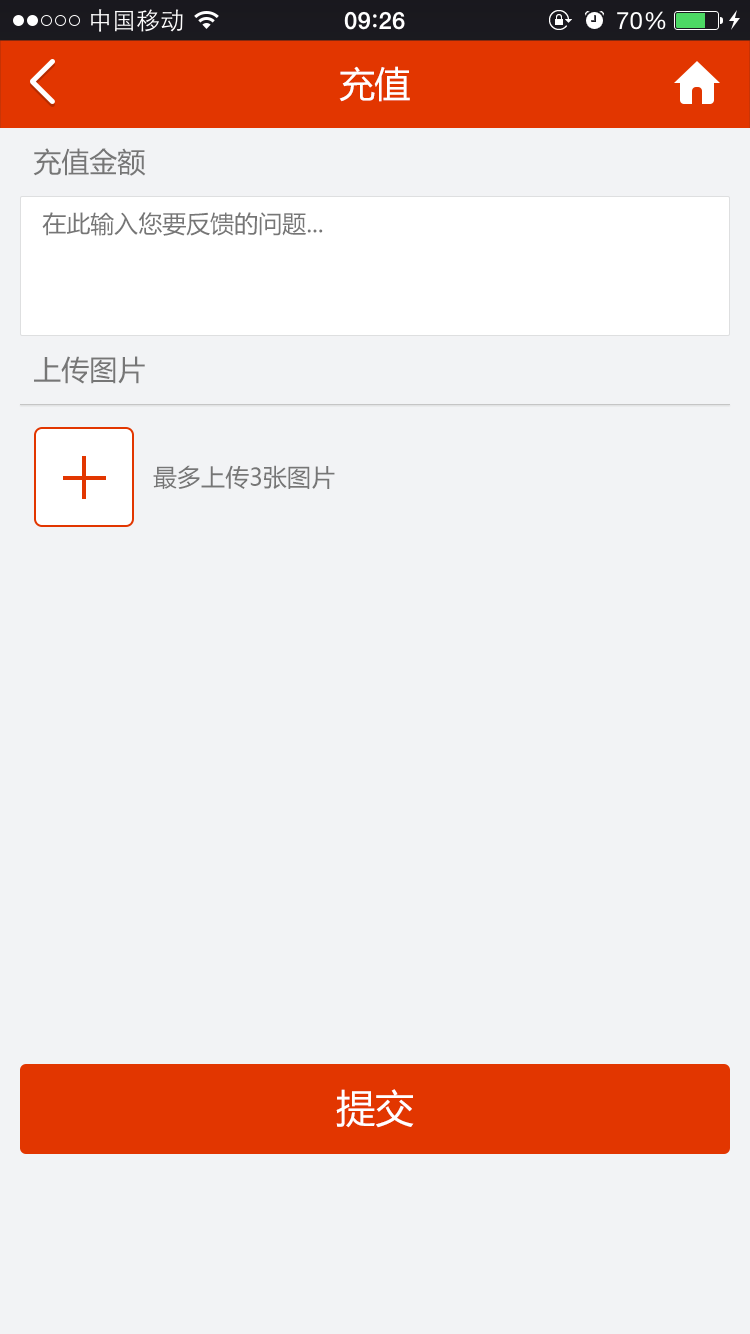
<style>
.page{position:relative;width:750px;height:1334px;background:#f2f3f5}
.page>*{position:absolute;margin:0}
.t1{font:36px "MicrosoftYaHei";letter-spacing:-0.025em;color:#ffffff}
.t2{font:28px "MicrosoftYaHei";color:#767676}
.t3{font:24px "MicrosoftYaHei";color:#767676}
.t4{font:39px "MicrosoftYaHei";color:#ffffff}
</style>
<div class="page">
<p class="t1" style="left:339px;top:66px;width:71px;height:36px">充值</p>
<p class="t2" style="left:33px;top:148px;width:113px;height:28px">充值金额</p>
<p class="t3" style="left:42px;top:212px;width:281px;height:24px">在此输入您要反馈的问题...</p>
<p class="t2" style="left:34px;top:356px;width:111px;height:28px">上传图片</p>
<p class="t3" style="left:153px;top:465px;width:182px;height:24px">最多上传3张图片</p>
<p class="t4" style="left:336px;top:1089px;width:78px;height:39px">提交</p>
</div>
